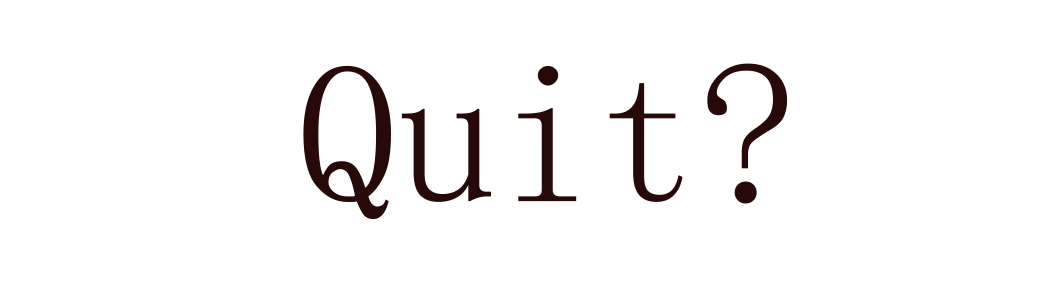
<style>
.page{position:relative;width:1063px;height:296px;background:#ffffff}
.page>*{position:absolute;margin:0}
.t1{font:200px "SimSun-ExtB";color:#270909}
</style>
<div class="page">
<p class="t1" style="left:303px;top:63px;width:485px;height:157px">Quit?</p>
</div>
